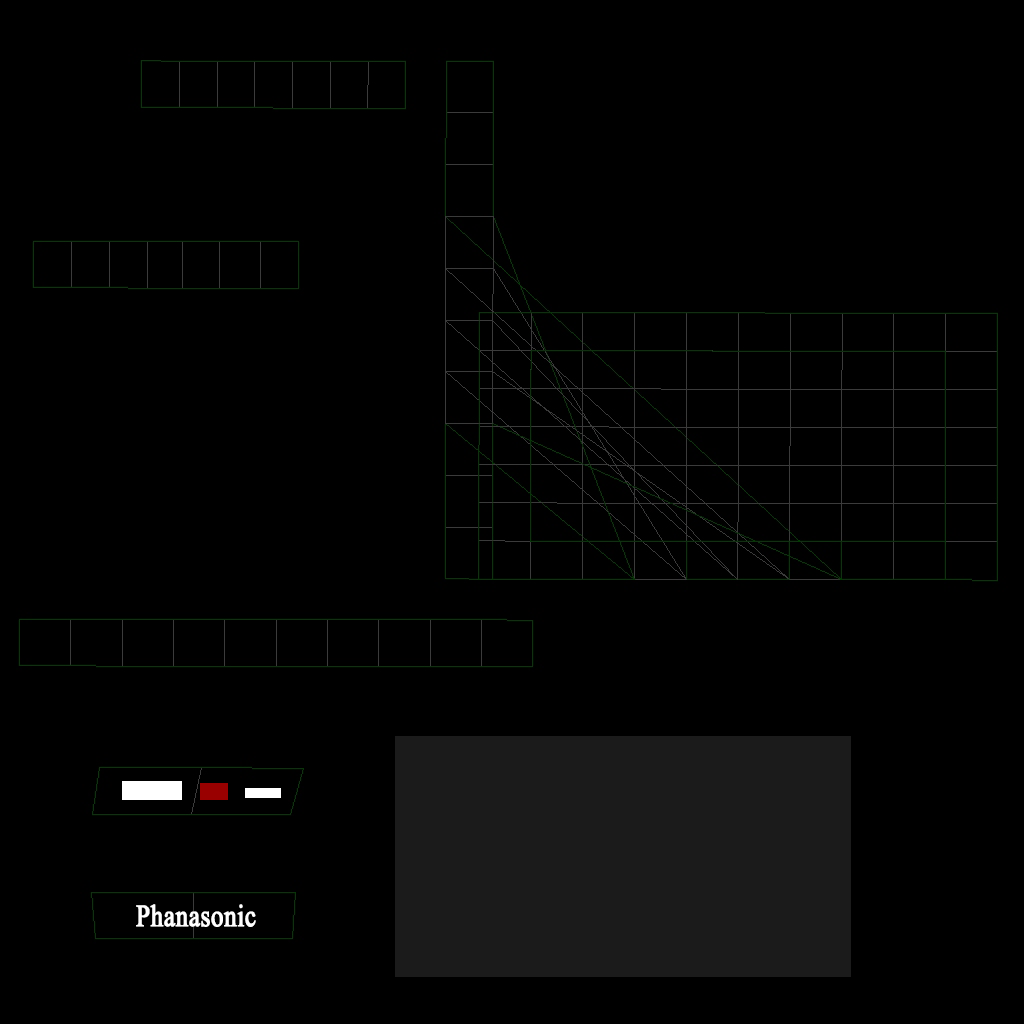
<style>
.page{position:relative;width:1024px;height:1024px;background:#000000}
.page>*{position:absolute;margin:0}
.t1{font:30.8px "TimesNewRomanPSMT";color:#ffffff;font-weight:bold;scale:0.81 1}
</style>
<div class="page">
<p class="t1" style="left:136px;top:904px;width:120px;height:23px">Phanasonic</p>
</div>
